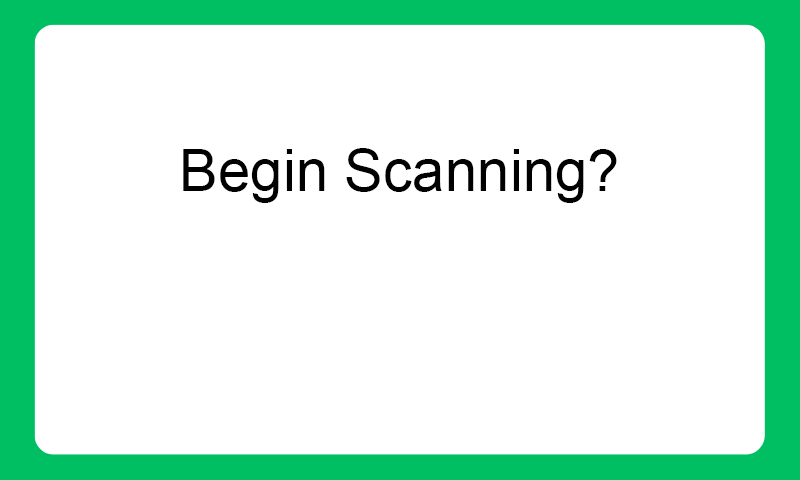
<style>
.page{position:relative;width:800px;height:480px;background:#ffffff}
.page>*{position:absolute;margin:0}
.t1{font:58.3px "ArialMT";color:#000000}
</style>
<div class="page">
<p class="t1" style="left:183px;top:148px;width:434px;height:55px">Begin Scanning?</p>
</div>
